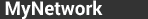
<style>
.page{position:relative;width:148px;height:19px;background:#333333}
.page>*{position:absolute;margin:0}
.t1{font:19px "Roboto-Bold";color:#ffffff}
</style>
<div class="page">
<p class="t1" style="left:5px;top:0px;width:98px;height:19px">MyNetwork</p>
</div>
